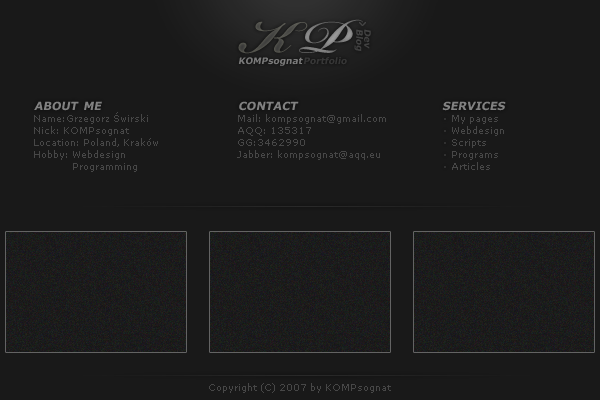
<style>
.page{position:relative;width:600px;height:400px;background:#191919}
.page>*{position:absolute;margin:0}
.t1{font:72px "BickhamScriptPro-Bold";color:#4a4a46}
.t2{font:72px "BickhamScriptPro-Bold";color:#868686}
.t3{font:9px/8px "Verdana-Bold";color:#424242;font-style:italic}
.t4{font:9px "Verdana-Bold";color:#797979;font-style:italic}
.t5{font:9px "Verdana-Bold";color:#363636;font-style:italic}
.t6{font:16px "Verdana-Bold";color:#818181;font-variant:small-caps;font-style:italic}
.t7{font:9px/12px "Verdana";color:#474747}
.t8{font:9px "Verdana";color:#474747}
</style>
<div class="page">
<p class="t1" style="left:238px;top:21px;width:70px;height:33px">K</p>
<p class="t2" style="left:299px;top:19px;width:64px;height:34px">P</p>
<p class="t3" style="left:354px;top:29px;width:17px;height:23px;rotate:90deg">Dev<br>Blog</p>
<p class="t4" style="left:238px;top:57px;width:65px;height:9px">KOMPsognat</p>
<p class="t5" style="left:303px;top:57px;width:44px;height:8px">Portfolio</p>
<p class="t6" style="left:34px;top:101px;width:68px;height:10px">about me</p>
<p class="t6" style="left:239px;top:101px;width:60px;height:10px">contact</p>
<p class="t6" style="left:442px;top:101px;width:64px;height:10px">services</p>
<p class="t7" style="left:34px;top:112px;width:124px;height:60px">Name:Grzegorz Świrski<br>Nick: KOMPsognat<br>Location: Poland, Kraków<br>Hobby: Webdesign <br>             Programming</p>
<p class="t7" style="left:237px;top:114px;width:149px;height:46px">Mail: kompsognat@gmail.com<br>AQQ: 135317<br>GG:3462990<br>Jabber: kompsognat@aqq.eu</p>
<p class="t7" style="left:452px;top:115px;width:52px;height:55px">My pages<br>Webdesign<br>Scripts<br>Programs<br>Articles</p>
<p class="t8" style="left:209px;top:383px;width:182px;height:10px">Copyright (C) 2007 by KOMPsognat</p>
</div>
